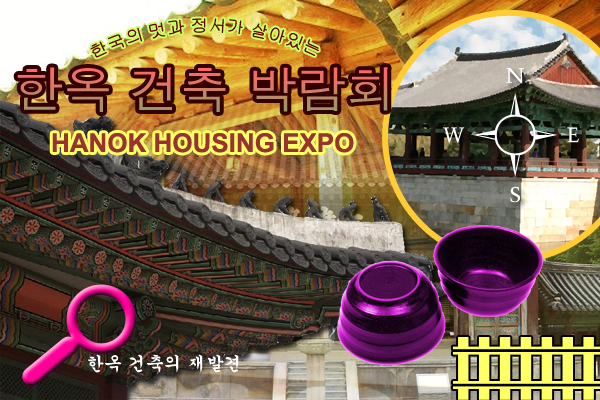
<style>
.page{position:relative;width:600px;height:400px}
.page>*{position:absolute;margin:0}
.t1{font:17px "Gulim";color:#660000}
.t2{font:50px "Dotum"}
.t3{font:26px "Arial-BoldMT";color:#993333}
.t4{font:18px "Gungsuh";color:#fefeff}
</style>
<div class="page">
<p class="t1" style="left:90px;top:18px;width:229px;height:40px">한국의 멋과 정서가 살아있는</p>
<p class="t2" style="left:17px;top:67px;width:371px;height:45px">한옥 건축 박람회</p>
<p class="t3" style="left:52px;top:133px;width:302px;height:20px">HANOK HOUSING EXPO</p>
<p class="t4" style="left:87px;top:354px;width:152px;height:19px">한옥 건축의 재발견</p>
</div>
